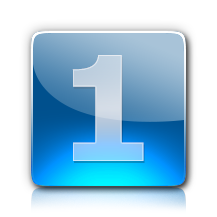
<style>
.page{position:relative;width:217px;height:217px;background:#ffffff}
.page>*{position:absolute;margin:0}
.t1{font:145.8px "Verdana-Bold";text-transform:uppercase}
</style>
<div class="page">
<p class="t1" style="left:72px;top:55px;width:72px;height:106px">1</p>
</div>
